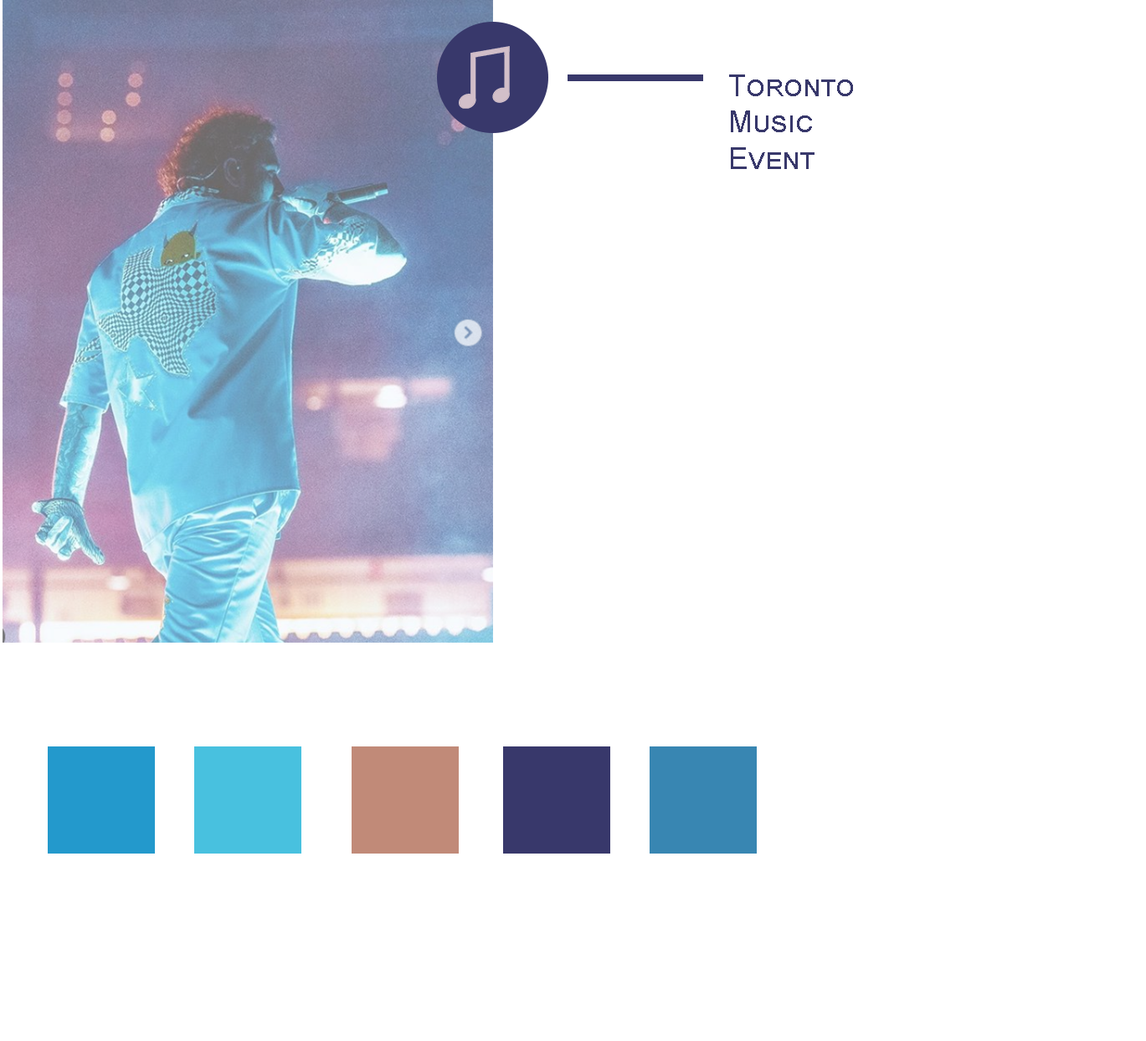
<style>
.page{position:relative;width:1146px;height:1041px;background:#ffffff}
.page>*{position:absolute;margin:0}
.t1{font:30.1px "ArialMT";color:#38386b;font-variant:small-caps}
</style>
<div class="page">
<p class="t1" style="left:729px;top:74px;width:124px;height:95px;text-align:justify">Toronto<br>Music <br>Event</p>
</div>
